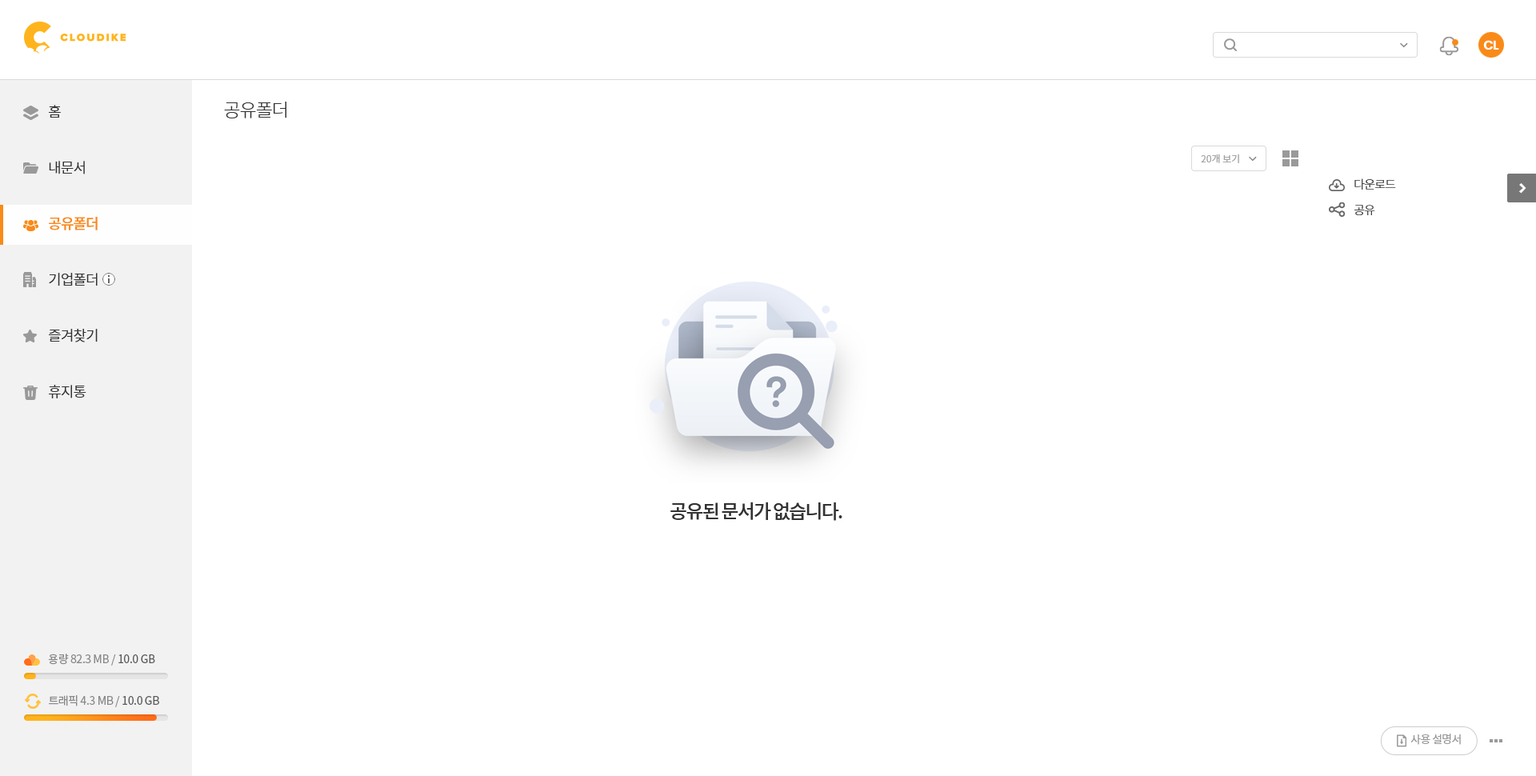
<style>
.page{position:relative;width:1536px;height:776px;background:#ffffff}
.page>*{position:absolute;margin:0}
.t1{font:12.8px "Poppins-SemiBold";letter-spacing:-0.05em;color:#ffffff}
.t2{font:18.4px "NotoSansCJKkr-Light";letter-spacing:-0.05em;color:#333333}
.t3{font:14.4px/56px "NotoSansCJKkr-DemiLight";letter-spacing:-0.05em;color:#333333}
.t4{font:14.4px/56px "NotoSansCJKkr-Medium";letter-spacing:-0.05em;color:#f98a17}
.t5{font:9.6px "NotoSansCJKkr-DemiLight";color:#a1a1a1}
.t6{font:12px/25.6px "NotoSansCJKkr-Light";letter-spacing:-0.05em;color:#333333}
.t7{font:19.2px "NotoSansCJKkr-Medium";letter-spacing:-0.075em;color:#333333}
.t8{font:11.2px "NotoSansCJKkr-Regular";letter-spacing:-0.025em;color:#888888}
.t9{font:11.2px "NotoSansCJKkr-Regular";letter-spacing:-0.025em;color:#585858}
.t10{font:11.2px "NotoSansCJKkr-Regular";letter-spacing:-0.05em;color:#999999}
</style>
<div class="page">
<p class="t1" style="left:1484px;top:40px;width:16px;height:10px">CL</p>
<p class="t2" style="left:224px;top:102px;width:62px;height:16px">공유폴더</p>
<p class="t3" style="left:49px;top:105px;width:49px;height:293px">홈<br>내문서<br><span class="t4">공유폴더<br></span>기업폴더<br>즐겨찾기<br>휴지통</p>
<p class="t5" style="left:1201px;top:154px;width:38px;height:9px">20개 보기</p>
<p class="t6" style="left:1355px;top:178px;width:41px;height:37px">다운로드<br>공유</p>
<p class="t7" style="left:671px;top:502px;width:172px;height:19px">공유된 문서가 없습니다.</p>
<p class="t8" style="left:48px;top:654px;width:107px;height:12px">용량 82.3 MB / <span class="t9">10.0 GB</span></p>
<p class="t8" style="left:49px;top:695px;width:110px;height:12px">트래픽 4.3 MB / <span class="t9">10.0 GB</span></p>
<p class="t10" style="left:1411px;top:734px;width:50px;height:11px">사용 설명서</p>
</div>
